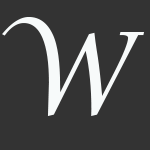
<style>
.page{position:relative;width:150px;height:150px;background:#333333}
.page>*{position:absolute;margin:0}
.t1{font:115px "LucidaCalligraphy-Italic";color:#f7fafa}
</style>
<div class="page">
<p class="t1" style="left:2px;top:17px;width:143px;height:99px">W</p>
</div>
